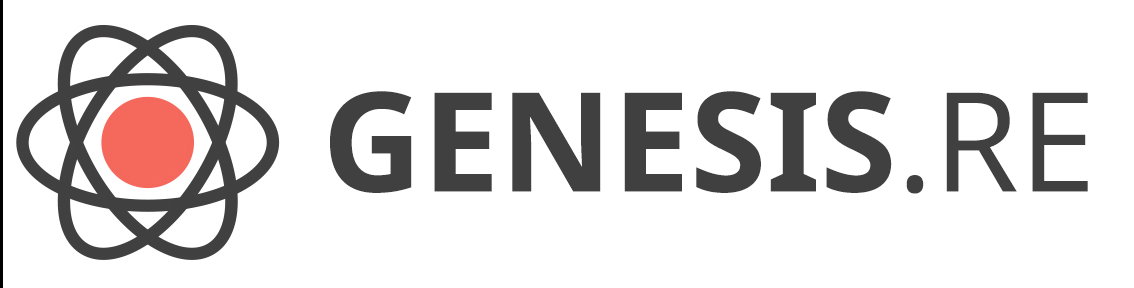
<style>
.page{position:relative;width:1134px;height:288px;background:#ffffff}
.page>*{position:absolute;margin:0}
.t1{font:138.3px "OpenSans-Bold";color:#404040}
.t2{font:138.3px "OpenSans";color:#404040}
</style>
<div class="page">
<p class="t1" style="left:330px;top:91px;width:758px;height:103px">GENESIS<span class="t2">.RE</span></p>
</div>
